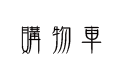
<style>
.page{position:relative;width:120px;height:80px;background:#ffffff}
.page>*{position:absolute;margin:0}
.t1{font:30px "DFJinWen-W3-WINP-BF";color:#040000}
</style>
<div class="page">
<p class="t1" style="left:21px;top:25px;width:81px;height:29px">購物車</p>
</div>
